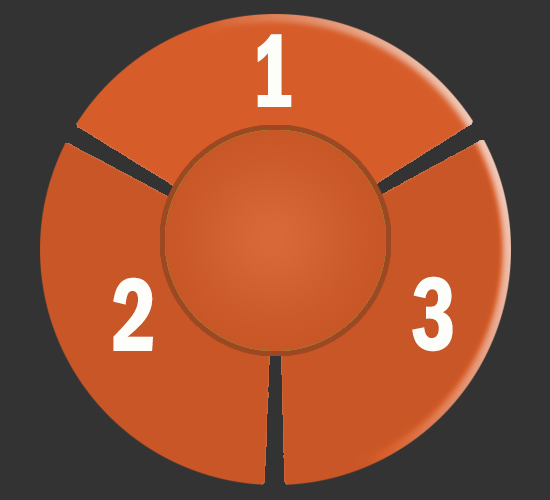
<style>
.page{position:relative;width:550px;height:500px;background:#333333}
.page>*{position:absolute;margin:0}
.t1{font:108px "FranklinGothic-DemiCond";letter-spacing:0.01em;color:#fdfdfa;scale:0.83 1}
</style>
<div class="page">
<p class="t1" style="left:257px;top:34px;width:35px;height:73px">1</p>
<p class="t1" style="left:113px;top:277px;width:40px;height:74px">2</p>
<p class="t1" style="left:412px;top:276px;width:41px;height:76px">3</p>
</div>
